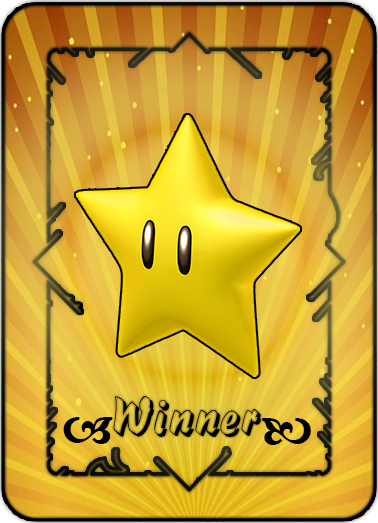
<style>
.page{position:relative;width:378px;height:523px}
.page>*{position:absolute;margin:0}
.t1{font:50px "DSBisonShadow";color:#000000}
</style>
<div class="page">
<p class="t1" style="left:113px;top:396px;width:148px;height:41px">Winner</p>
</div>
